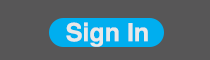
<style>
.page{position:relative;width:210px;height:60px;background:#575657}
.page>*{position:absolute;margin:0}
.t1{font:25px "TeXGyreHeros-Bold";color:#e9e8e8}
</style>
<div class="page">
<p class="t1" style="left:66px;top:22px;width:82px;height:25px">Sign In</p>
</div>
